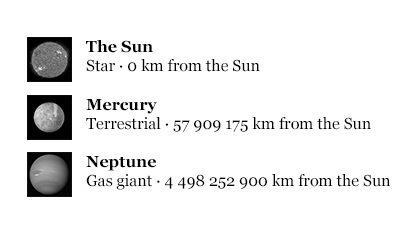
<style>
.page{position:relative;width:420px;height:230px;background:#ffffff}
.page>*{position:absolute;margin:0}
.t1{font:16px "Georgia";color:#000000}
.t2{font:16px "Georgia-Bold";color:#000000}
</style>
<div class="page">
<p class="t1" style="left:86px;top:40px;width:305px;height:150px"><span class="t2">The Sun<br></span>Star · 0 km from the Sun<br><br><span class="t2">Mercury<br></span>Terrestrial · 57 909 175 km from the Sun<br><span class="t2"><br>Neptune<br></span>Gas giant · 4 498 252 900 km from the Sun</p>
</div>
